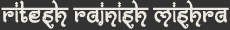
<style>
.page{position:relative;width:230px;height:30px;background:#333333}
.page>*{position:absolute;margin:0}
.t1{font:31.5px "Bitlingmoksh-Regular";color:#eeeae2}
</style>
<div class="page">
<p class="t1" style="left:1px;top:0px;width:228px;height:29px">Ritesh Rajnish Mishra</p>
</div>
